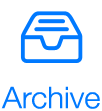
<style>
.page{position:relative;width:102px;height:111px;background:#ffffff}
.page>*{position:absolute;margin:0}
.t1{font:30px "HelveticaNeueLTCom-Lt";color:#0079ff;scale:1.04 1}
</style>
<div class="page">
<p class="t1" style="left:1px;top:86px;width:99px;height:23px">Archive</p>
</div>
